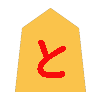
<style>
.page{position:relative;width:100px;height:100px;background:#ffffff}
.page>*{position:absolute;margin:0}
.t1{font:50px "UDDigiKyokashoN-B";color:#f80b0b}
</style>
<div class="page">
<p class="t1" style="left:37px;top:40px;width:29px;height:38px">と</p>
</div>
